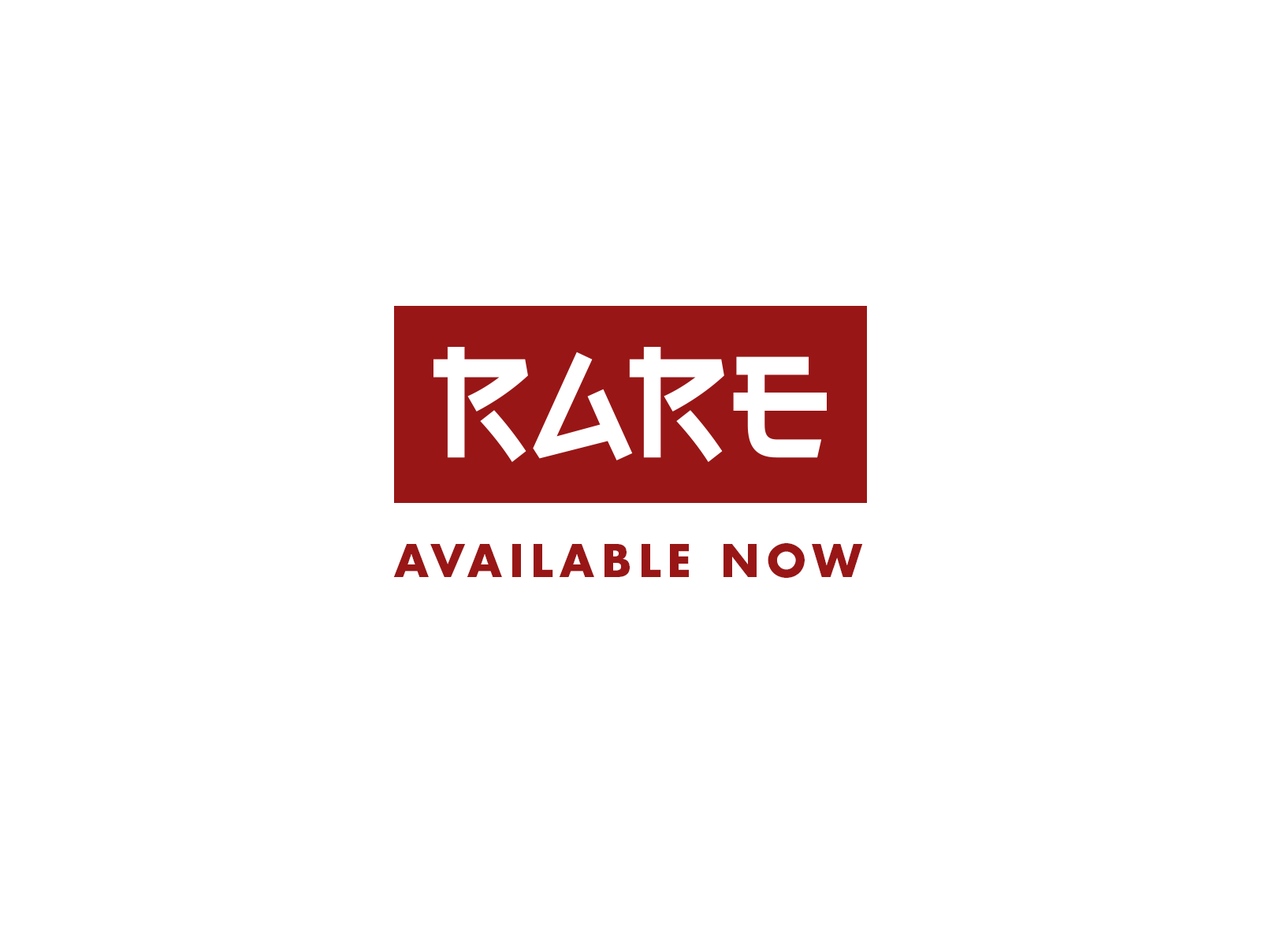
<style>
.page{position:relative;width:1261px;height:946px;background:#ffffff}
.page>*{position:absolute;margin:0}
.t1{font:44.2px "Futura-Bold";letter-spacing:0.16em;color:#991616}
</style>
<div class="page">
<p class="t1" style="left:393px;top:543px;width:470px;height:35px">AVAILABLE NOW</p>
</div>
